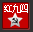
<style>
.page{position:relative;width:33px;height:32px;background:#c50000}
.page>*{position:absolute;margin:0}
.t1{font:10.4px "SimSun";letter-spacing:-0.25em;color:#ffffff}
</style>
<div class="page">
<p class="t1" style="left:4px;top:4px;width:24px;height:9px">红九四</p>
</div>
